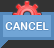
<style>
.page{position:relative;width:54px;height:48px;background:#333333}
.page>*{position:absolute;margin:0}
.t1{font:10.5px "ArialRoundedMTBold";letter-spacing:0.02em;color:#ffffff;scale:0.95 1}
</style>
<div class="page">
<p class="t1" style="left:5px;top:22px;width:44px;height:8px">CANCEL</p>
</div>
